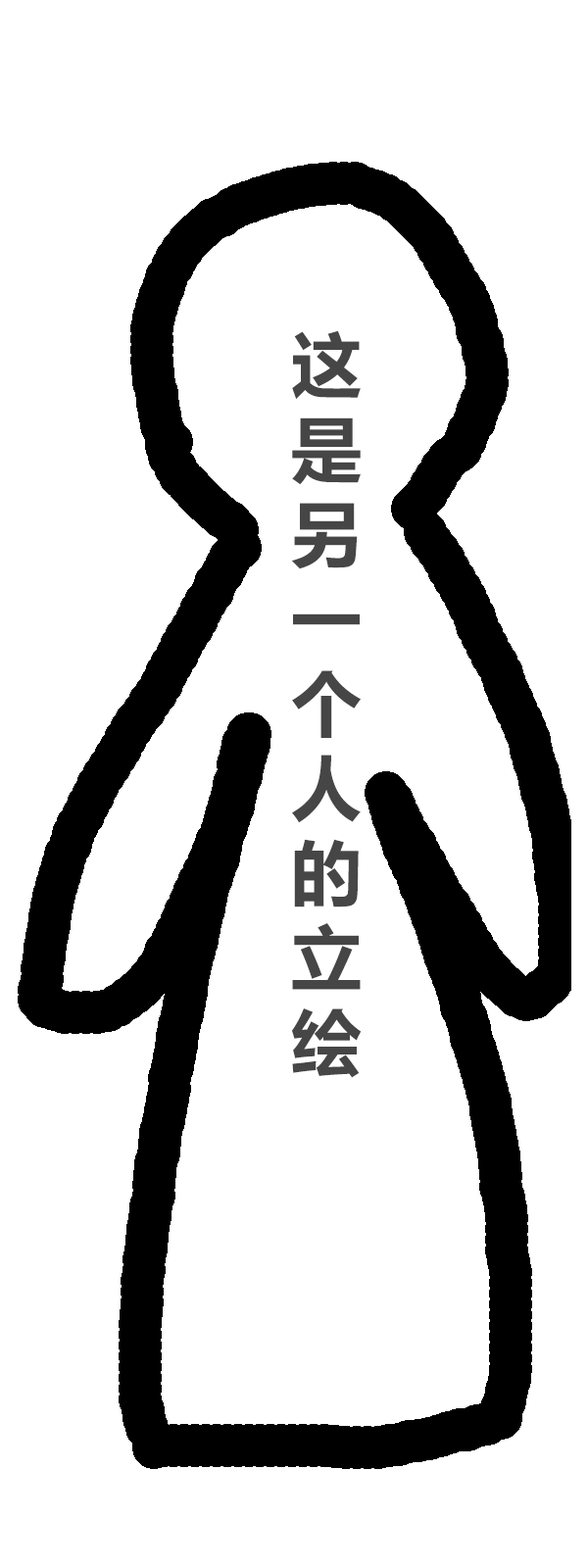
<style>
.page{position:relative;width:588px;height:1568px;background:#ffffff}
.page>*{position:absolute;margin:0}
.t1{font:70.6px "MicrosoftYaHei-Bold";color:#464646}
</style>
<div class="page">
<p class="t1" style="left:291px;top:330px;width:71px;height:748px">这<br>是<br>另<br>一<br>个<br>人<br>的<br>立<br>绘</p>
</div>
